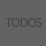
<style>
.page{position:relative;width:46px;height:46px;background:#636363}
.page>*{position:absolute;margin:0}
.t1{font:12px "MyriadPro-Regular";color:#454545}
</style>
<div class="page">
<p class="t1" style="left:5px;top:18px;width:37px;height:9px">TODOS</p>
</div>
